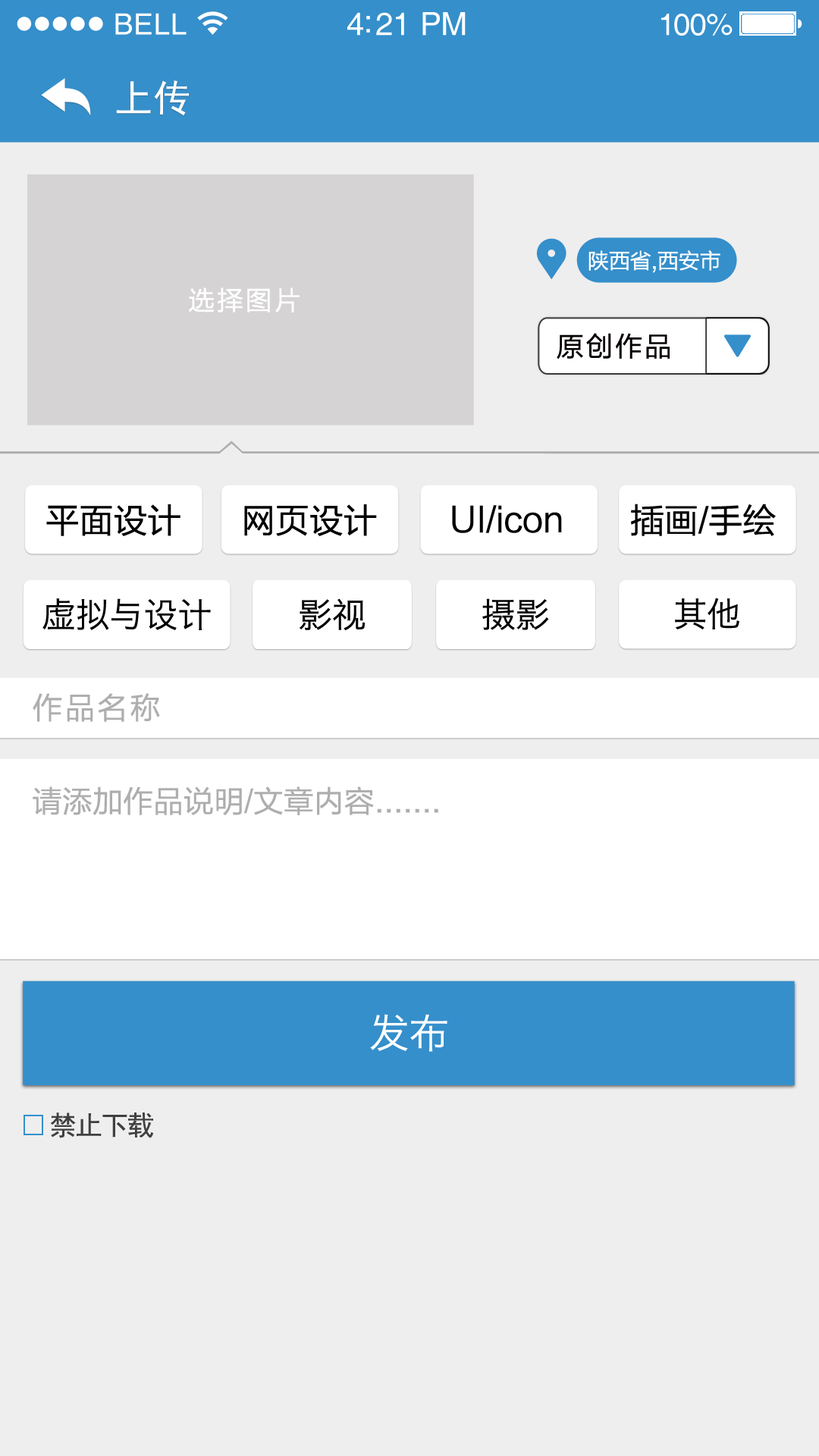
<style>
.page{position:relative;width:819px;height:1456px;background:#eeeeee}
.page>*{position:absolute;margin:0}
.t1{font:29.3px "Helvetica";letter-spacing:0.02em;color:#ffffff}
.t2{font:31.8px "Helvetica";letter-spacing:-0.02em;color:#ffffff}
.t3{font:30.6px "Helvetica";letter-spacing:-0.02em;color:#ffffff}
.t4{font:37.9px "SimHei";letter-spacing:0.025em;color:#ffffff}
.t5{font:21.2px "FZLTHJW--GB1-0";color:#ffffff}
.t6{font:26.5px "FZLTHJW--GB1-0";letter-spacing:0.075em;color:#ffffff}
.t7{font:27.3px "FZLTHJW--GB1-0";letter-spacing:0.075em;color:#060000}
.t8{font:34.1px "FZLTHJW--GB1-0";color:#010000}
.t9{font:34.1px "FZLTHJW--GB1-0";color:#000000}
.t10{font:34.1px "HiraginoSansGB-W3";color:#000000}
.t11{font:30.3px "FZLTHJW--GB1-0";letter-spacing:0.075em;color:#aeaeae}
.t12{font:30.3px "FZLTHJW--GB1-0";color:#aeaeae}
.t13{font:40.2px "HiraginoSansGB-W3";color:#ffffff}
.t14{font:27.3px "SimHei";letter-spacing:-0.05em;color:#404040}
</style>
<div class="page">
<p class="t1" style="left:115px;top:13px;width:72px;height:22px">BELL</p>
<p class="t2" style="left:347px;top:12px;width:119px;height:24px">4:21 PM</p>
<p class="t3" style="left:661px;top:14px;width:72px;height:22px">100%</p>
<p class="t4" style="left:116px;top:80px;width:73px;height:36px">上传</p>
<p class="t5" style="left:588px;top:250px;width:132px;height:23px">陕西省,西安市</p>
<p class="t6" style="left:189px;top:287px;width:111px;height:25px">选择图片</p>
<p class="t7" style="left:557px;top:333px;width:113px;height:26px">原创作品</p>
<p class="t8" style="left:46px;top:504px;width:134px;height:32px">平面设计</p>
<p class="t9" style="left:244px;top:504px;width:133px;height:32px">网页设计</p>
<p class="t9" style="left:452px;top:505px;width:110px;height:28px">UI/icon</p>
<p class="t9" style="left:631px;top:504px;width:145px;height:32px">插画/手绘</p>
<p class="t10" style="left:42px;top:598px;width:169px;height:32px">虚拟与设计</p>
<p class="t10" style="left:300px;top:598px;width:66px;height:33px">影视</p>
<p class="t10" style="left:482px;top:598px;width:67px;height:32px">摄影</p>
<p class="t10" style="left:675px;top:598px;width:64px;height:31px">其他</p>
<p class="t11" style="left:33px;top:693px;width:127px;height:29px">作品名称</p>
<p class="t12" style="left:33px;top:786px;width:405px;height:29px">请添加作品说明/文章内容.......</p>
<p class="t13" style="left:370px;top:1014px;width:77px;height:38px">发布</p>
<p class="t14" style="left:50px;top:1112px;width:104px;height:26px">禁止下载</p>
</div>
